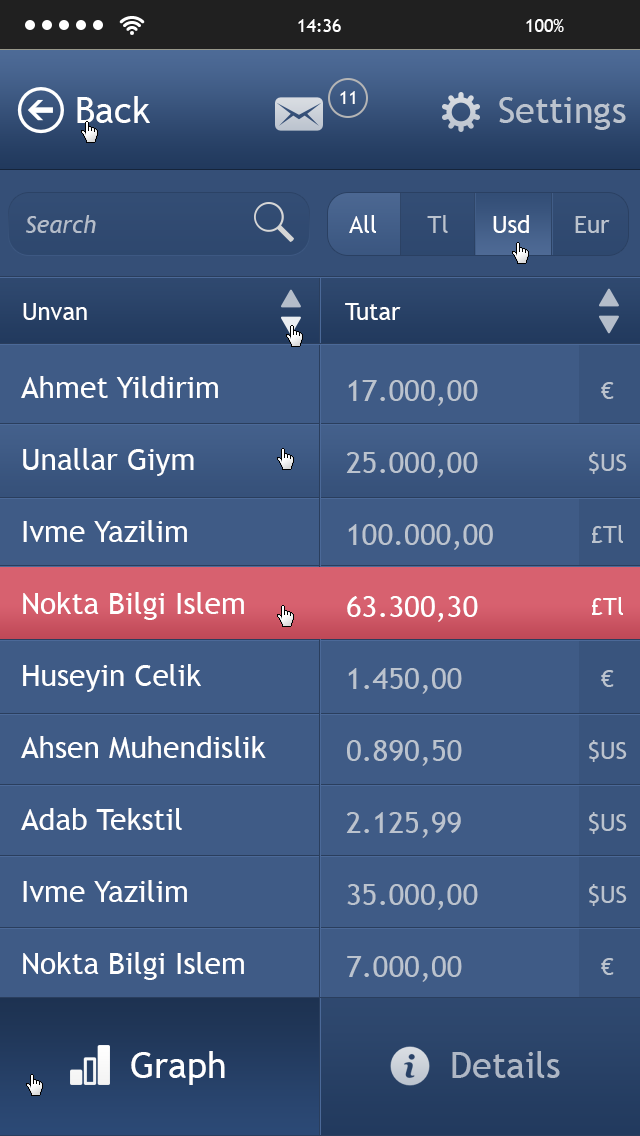
<style>
.page{position:relative;width:640px;height:1136px;background:#3f5b86}
.page>*{position:absolute;margin:0}
.t1{font:36px "TrebuchetMS";color:#ffffff}
.t2{font:18px "TrebuchetMS";color:#fefefe}
.t3{font:36px "TrebuchetMS";color:#bbc3ce}
.t4{font:24px "TrebuchetMS-Italic";color:#b4bdca}
.t5{font:24px "TrebuchetMS";color:#ffffff}
.t6{font:24px "TrebuchetMS";color:#bbc3ce}
.t7{font:30px/72px "TrebuchetMS";color:#ffffff}
.t8{font:30px/72px "TrebuchetMS";color:#bbc3ce}
.t9{font:24px/72px "TrebuchetMS";color:#bbc3ce}
.t10{font:24px/72px "TrebuchetMS";color:#ffffff}
.t11{font:36px "TrebuchetMS";color:#aeb7c5}
</style>
<div class="page">
<p class="t1" style="left:77px;top:96px;width:73px;height:27px">Back</p>
<p class="t2" style="left:340px;top:91px;width:15px;height:13px">11</p>
<p class="t3" style="left:499px;top:97px;width:127px;height:33px">Settings</p>
<p class="t4" style="left:26px;top:215px;width:70px;height:18px">Search</p>
<p class="t5" style="left:349px;top:215px;width:261px;height:18px">All       <span class="t6">Tl      </span>Usd<span class="t6">      Eur</span></p>
<p class="t5" style="left:23px;top:303px;width:64px;height:17px">Unvan</p>
<p class="t5" style="left:345px;top:303px;width:56px;height:17px">Tutar</p>
<p class="t7" style="left:21px;top:376px;width:245px;height:742px">Ahmet Yildirim<br>Unallar Giym<br>Ivme Yazilim<br>Nokta Bilgi Islem<br>Huseyin Celik<br>Ahsen Muhendislik<br>Adab Tekstil<br>Ivme Yazilim<br>Nokta Bilgi Islem<br>Huseyin Celik<br>Ahmet Yildirim</p>
<p class="t8" style="left:346px;top:380px;width:147px;height:746px">17.000,00<br>25.000,00<br>100.000,00<br><span class="t7">63.300,30<br></span>1.450,00<br>0.890,50<br>2.125,99<br>35.000,00<br>7.000,00<br>1.900,00<br>234.000,40</p>
<p class="t9" style="left:589px;top:382px;width:38px;height:737px;text-align:center">€<br>$US<br>£Tl<br><span class="t10">£Tl<br></span>€<br>$US<br>$US<br>$US<br>€<br>£Tl<br>£Tl</p>
<p class="t1" style="left:131px;top:1051px;width:94px;height:34px">Graph</p>
<p class="t11" style="left:452px;top:1051px;width:108px;height:27px">Details</p>
</div>
